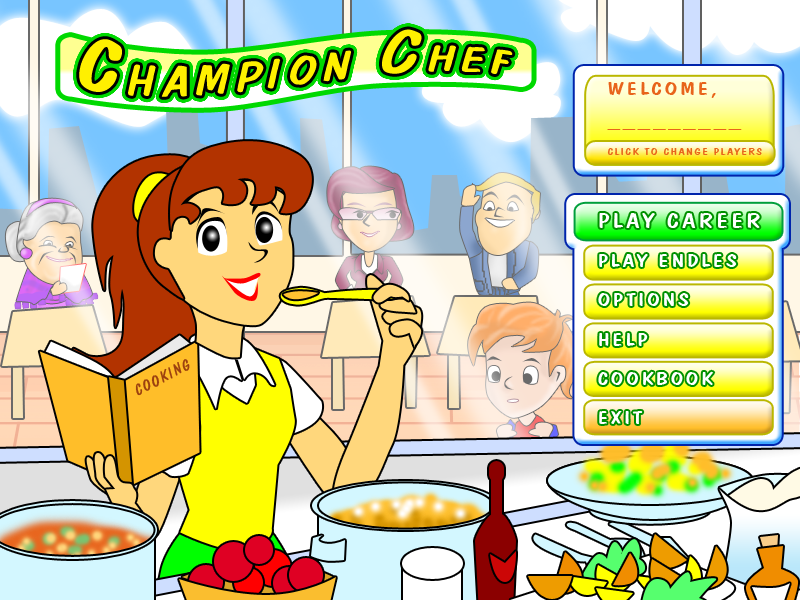
<style>
.page{position:relative;width:800px;height:600px}
.page>*{position:absolute;margin:0}
.t1{font:41.7px "DomCasualBT-Regular";letter-spacing:0.095em;color:#fff000;font-style:italic;scale:1.41 1}
.t2{font:69.1px "DomCasualBT-Regular";letter-spacing:0.095em;color:#fff000;font-style:italic;scale:1.41 1}
.t3{font:65.7px "DomCasualBT-Regular";letter-spacing:0.095em;color:#fff000;font-style:italic;scale:1.41 1}
.t4{font:40.1px "DomCasualBT-Regular";letter-spacing:0.095em;color:#fff000;font-style:italic;scale:1.41 1}
.t5{font:10.2px/29.8px "DomCasualBT-Regular";letter-spacing:0.095em;color:#e8641b;scale:1.32 1}
.t6{font:19.2px/34.4px "DomCasualBT-Regular";letter-spacing:0.095em;color:#e8641b;scale:1.32 1}
.t7{font:19.2px/29.8px "DomCasualBT-Regular";letter-spacing:0.095em;color:#e8641b;scale:1.32 1}
.t8{font:19.2px/39.4px "DomCasualBT-Regular";letter-spacing:0.095em;color:#ffffff;scale:1.32 1}
.t9{font:21.9px/39.4px "DomCasualBT-Regular";letter-spacing:0.095em;color:#ffffff;scale:1.32 1}
.t10{font:15.9px "DomCasualBT-Regular";letter-spacing:0.095em;color:#9c410f}
</style>
<div class="page">
<p class="t1" style="left:79px;top:29px;width:434px;height:68px"><span class="t2">C</span>HAMPION <span class="t3">C</span><span class="t4">HEF</span></p>
<p class="t5" style="left:607px;top:82px;width:155px;height:73px"><span class="t6">WELCOME,<br></span><span class="t7">_________<br></span>CLICK TO CHANGE PLAYERS</p>
<p class="t8" style="left:598px;top:213px;width:162px;height:211px"><span class="t9">PLAY CAREER<br></span>PLAY ENDLES<br>OPTIONS<br>HELP<br>COOKBOOK<br>EXIT</p>
<p class="t10" style="left:135px;top:359px;width:55px;height:37px;rotate:-27deg">COOKING</p>
</div>
